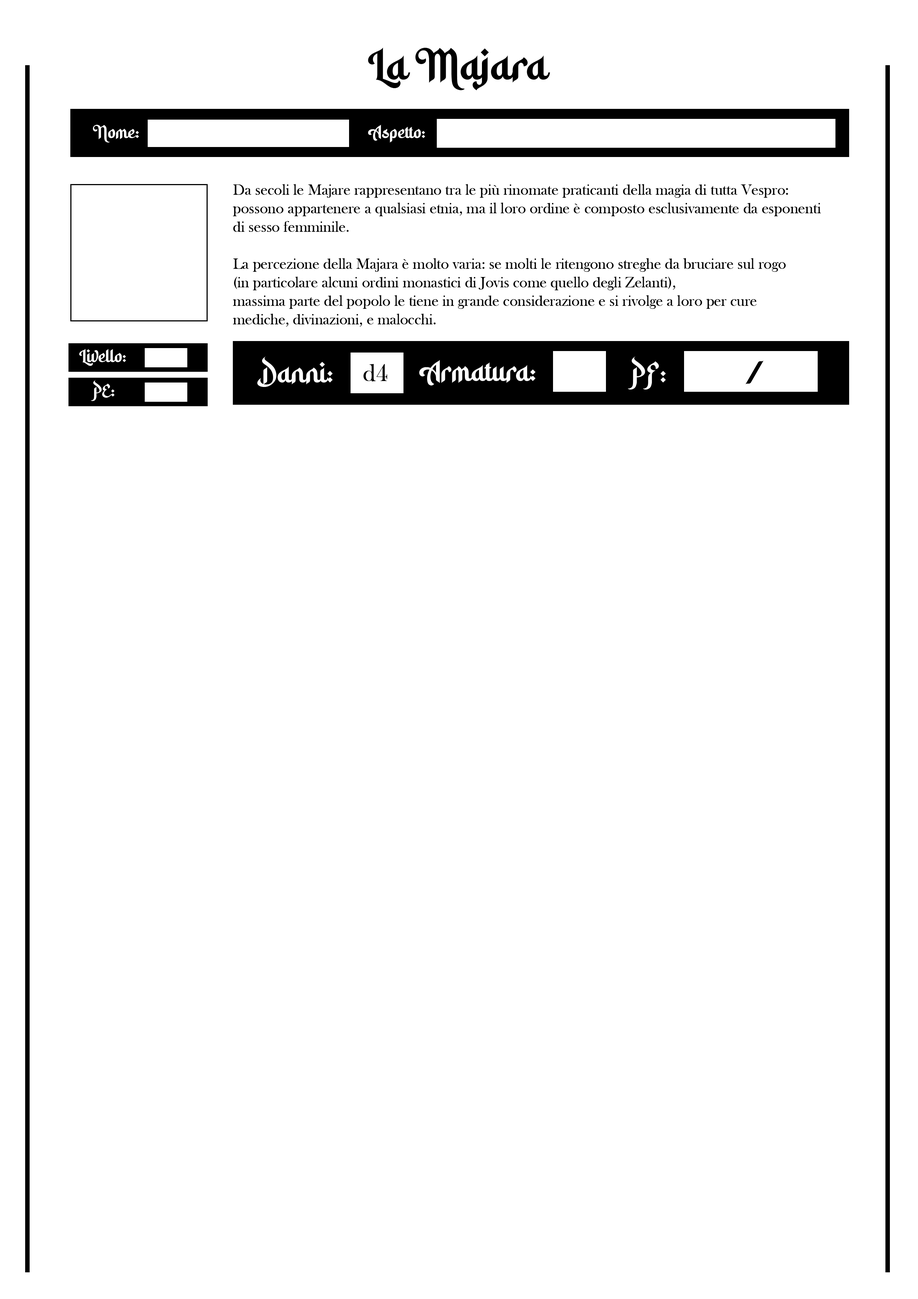
<style>
.page{position:relative;width:918px;height:1299px;background:#ffffff}
.page>*{position:absolute;margin:0}
.t1{font:37px "HidayatullahDEMO";color:#000000}
.t2{font:15.4px "HidayatullahDEMO";color:#ffffff}
.t3{font:15.4px "BaskOldFace";color:#000000}
.t4{font:24.7px "HidayatullahDEMO";color:#ffffff}
.t5{font:24.7px "BaskOldFace";color:#000000}
.t6{font:24.7px "HidayatullahDEMO";color:#000000}
</style>
<div class="page">
<p class="t1" style="left:368px;top:47px;width:182px;height:43px">La Majara</p>
<p class="t2" style="left:93px;top:125px;width:46px;height:18px">Nome:</p>
<p class="t2" style="left:368px;top:124px;width:57px;height:19px">Aspetto:</p>
<p class="t3" style="left:233px;top:184px;width:588px;height:143px">Da secoli le Majare rappresentano tra le più rinomate praticanti della magia di tutta Vespro: <br>possono appartenere a qualsiasi etnia, ma il loro ordine è composto esclusivamente da esponenti <br>di sesso femminile.<br><br>La percezione della Majara è molto varia: se molti le ritengono streghe da bruciare sul rogo <br>(in particolare alcuni ordini monastici di Jovis come quello degli Zelanti), <br>massima parte del popolo le tiene in grande considerazione e si rivolge a loro per cure <br>mediche, divinazioni, e malocchi.</p>
<p class="t2" style="left:79px;top:349px;width:47px;height:17px">Livello:</p>
<p class="t4" style="left:257px;top:356px;width:76px;height:31px">Danni:</p>
<p class="t5" style="left:364px;top:364px;width:23px;height:17px">d4</p>
<p class="t4" style="left:419px;top:359px;width:117px;height:26px">Armatura:</p>
<p class="t4" style="left:628px;top:356px;width:38px;height:33px">PF:</p>
<p class="t6" style="left:746px;top:361px;width:18px;height:23px">/</p>
<p class="t2" style="left:91px;top:380px;width:24px;height:21px">PE:</p>
</div>
